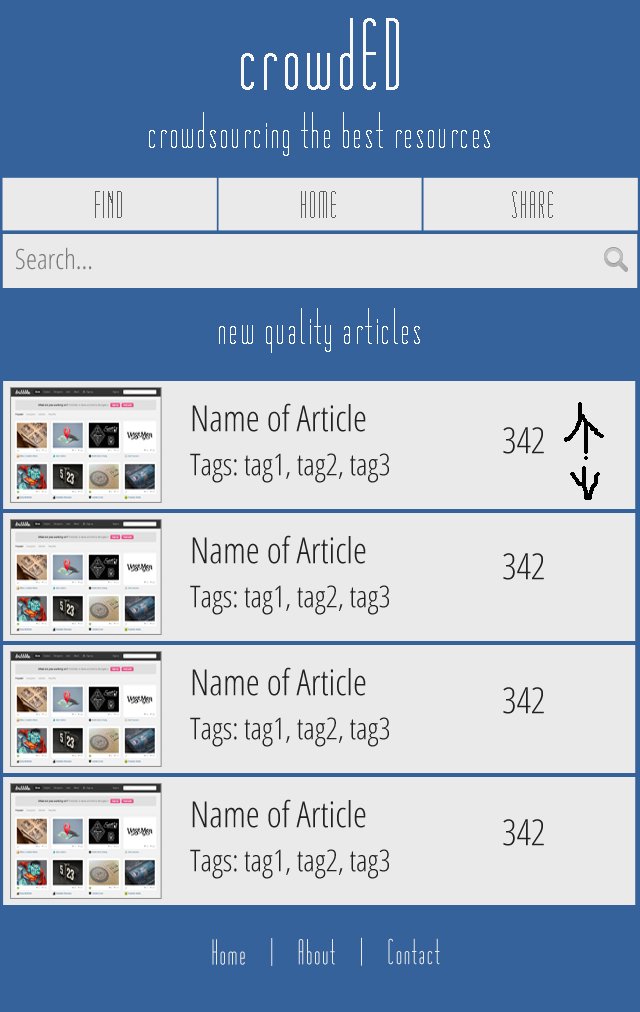
<style>
.page{position:relative;width:640px;height:1012px;background:#ebeaea}
.page>*{position:absolute;margin:0}
.t1{font:48px "Matchbook";color:#f8f8f8}
.t2{font:96px "Matchbook";color:#f8f8f8}
.t3{font:36px "Matchbook";color:#5c5c5c}
.t4{font:28px "OpenSans-CondensedLight";color:#7b7b7b}
.t5{font:30px/44px "OpenSans-CondensedLight";color:#222222}
.t6{font:36px/18px "OpenSans-CondensedLight";color:#222222}
.t7{font:36px "OpenSans-CondensedLight";color:#222222}
.t8{font:34px "Matchbook";color:#ebeaea}
</style>
<div class="page">
<p class="t1" style="left:149px;top:18px;width:341px;height:138px;text-align:center"><span class="t2">crowdED<br></span>crowdsourcing the best resources</p>
<p class="t3" style="left:95px;top:191px;width:27px;height:27px">FIND</p>
<p class="t3" style="left:301px;top:191px;width:35px;height:27px">HOME</p>
<p class="t3" style="left:512px;top:191px;width:41px;height:27px">SHARE</p>
<p class="t4" style="left:16px;top:247px;width:76px;height:23px">Search...</p>
<p class="t1" style="left:219px;top:308px;width:201px;height:45px">new quality articles</p>
<p class="t5" style="left:190px;top:403px;width:199px;height:80px"><span class="t6">Name of Article<br></span>Tags: tag1, tag2, tag3</p>
<p class="t7" style="left:503px;top:427px;width:41px;height:27px">342</p>
<p class="t5" style="left:190px;top:535px;width:199px;height:80px"><span class="t6">Name of Article<br></span>Tags: tag1, tag2, tag3</p>
<p class="t7" style="left:503px;top:553px;width:41px;height:27px">342</p>
<p class="t5" style="left:190px;top:667px;width:199px;height:80px"><span class="t6">Name of Article<br></span>Tags: tag1, tag2, tag3</p>
<p class="t7" style="left:503px;top:687px;width:41px;height:27px">342</p>
<p class="t5" style="left:190px;top:799px;width:199px;height:80px"><span class="t6">Name of Article<br></span>Tags: tag1, tag2, tag3</p>
<p class="t8" style="left:212px;top:937px;width:228px;height:29px">Home    |    About    |    Contact</p>
</div>
